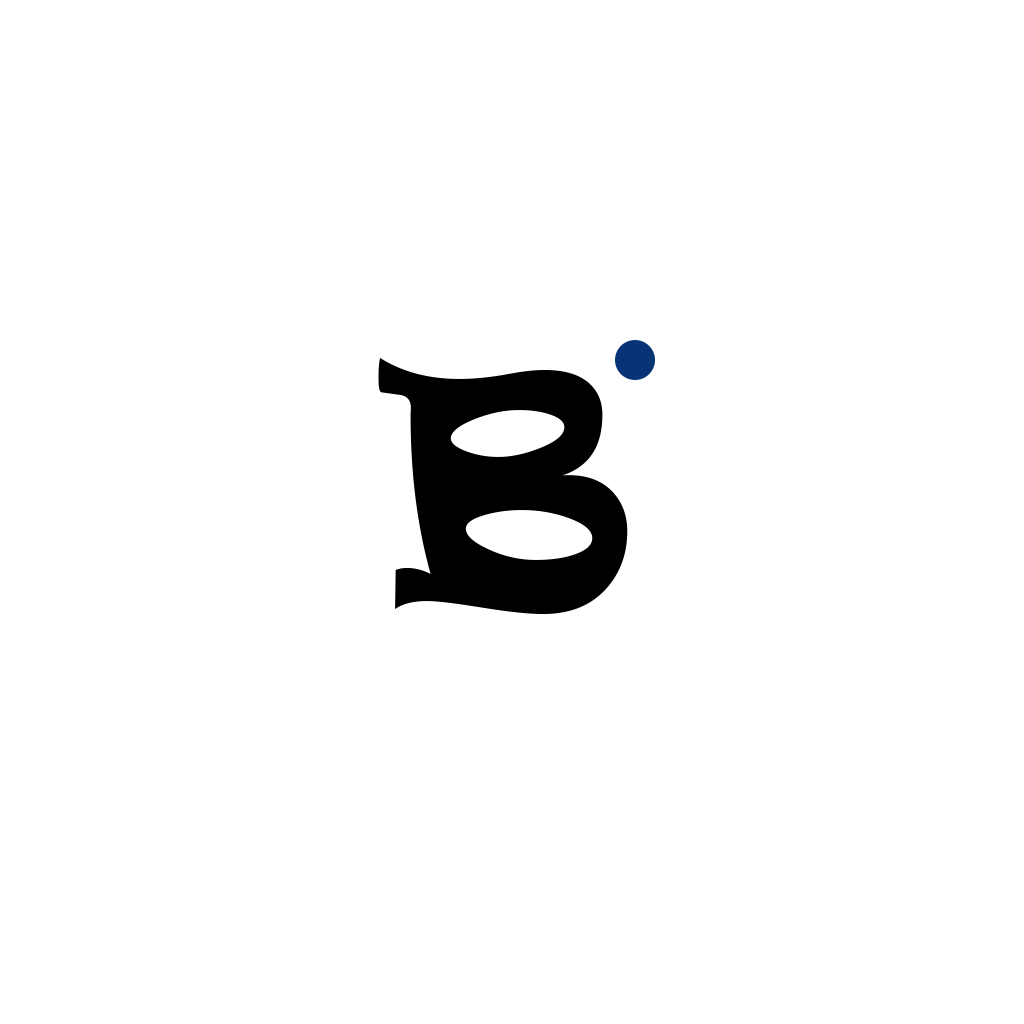
<style>
.page{position:relative;width:1024px;height:1024px;background:#ffffff}
.page>*{position:absolute;margin:0}
.t1{font:314px "Ravie";letter-spacing:0.13em;color:#000000}
</style>
<div class="page">
<p class="t1" style="left:378px;top:358px;width:250px;height:256px">B</p>
</div>
